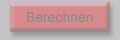
<style>
.page{position:relative;width:120px;height:40px;background:#d7898b}
.page>*{position:absolute;margin:0}
.t1{font:14px "ArialMT";color:#8b898b}
</style>
<div class="page">
<p class="t1" style="left:27px;top:12px;width:66px;height:10px">Berechnen</p>
</div>
